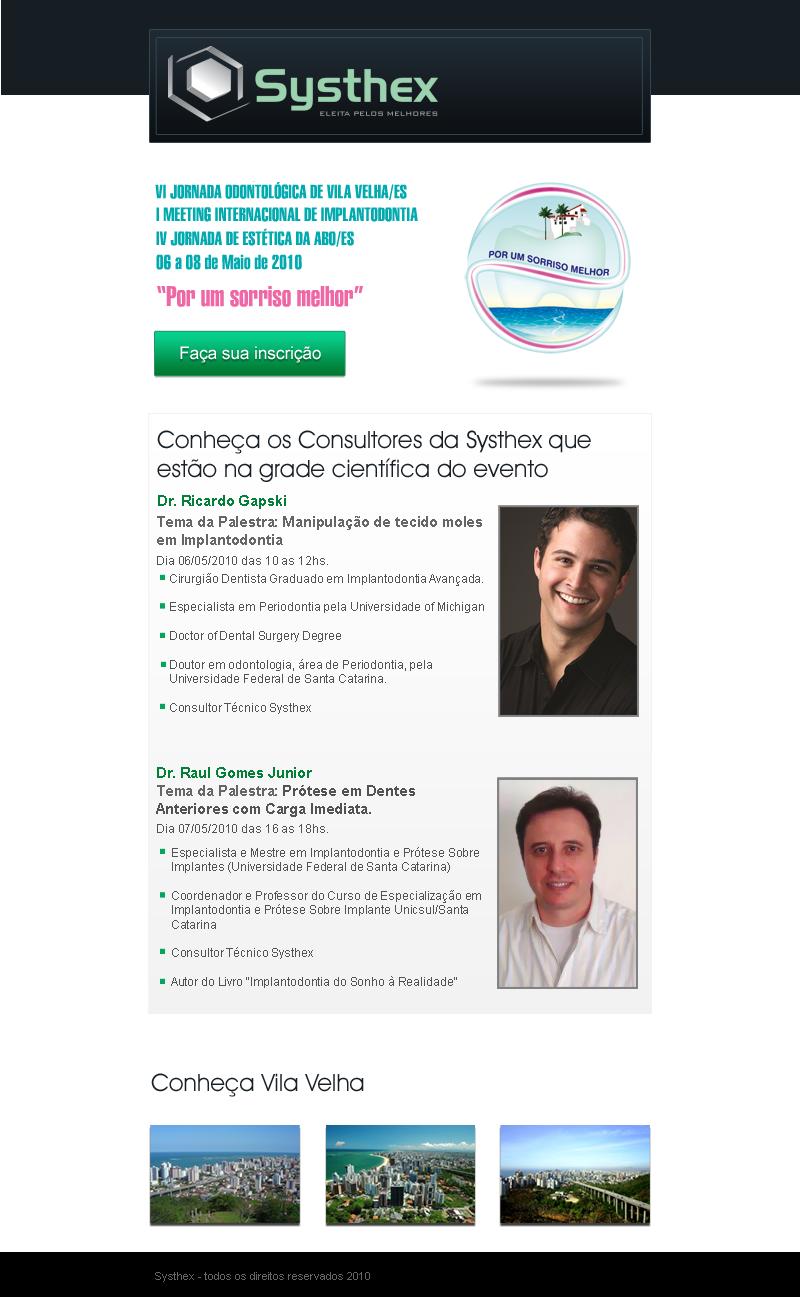
<style>
.page{position:relative;width:800px;height:1297px;background:#ffffff}
.page>*{position:absolute;margin:0}
.t1{font:8px "BankGothicBT-Medium";letter-spacing:-0.01em;color:#919496;text-transform:uppercase}
.t2{font:17.4px "ArialMT";letter-spacing:-0.01em;color:#ffffff}
.t3{font:24px "AvantGardeITCbyBT-Book";color:#182027}
.t4{font:15px "Arial-BoldMT";letter-spacing:-0.01em;color:#028038}
.t5{font:15px "Arial-BoldMT";letter-spacing:-0.01em;color:#666666}
.t6{font:12px "ArialMT";letter-spacing:-0.01em;color:#525252}
.t7{font:15px "Arial-BoldMT";letter-spacing:-0.01em;color:#525252}
.t8{font:11px "ArialMT";color:#666666}
</style>
<div class="page">
<p class="t1" style="left:320px;top:111px;width:118px;height:5px">Eleita Pelos Melhores</p>
<p class="t2" style="left:180px;top:346px;width:141px;height:17px">Faça sua inscrição</p>
<p class="t3" style="left:157px;top:430px;width:434px;height:52px">Conheça os Consultores da Systhex que estão na grade científica do evento</p>
<p class="t4" style="left:158px;top:495px;width:128px;height:14px">Dr. Ricardo Gapski</p>
<p class="t5" style="left:157px;top:516px;width:325px;height:32px">Tema da Palestra: Manipulação de tecido moles em Implantodontia<br><br>Data:06/05/2010 das 10:00 as 12:00 hs.</p>
<p class="t6" style="left:157px;top:556px;width:171px;height:9px">Dia 06/05/2010 das 10 as 12hs.</p>
<p class="t6" style="left:170px;top:573px;width:314px;height:141px">Cirurgião Dentista Graduado em Implantodontia Avançada.<br><br>Especialista em Periodontia pela Universidade of Michigan<br><br>Doctor of Dental Surgery Degree<br><br>Doutor em odontologia, área de Periodontia, pela Universidade Federal de Santa Catarina.<br><br>Consultor Técnico Systhex</p>
<p class="t4" style="left:157px;top:767px;width:155px;height:11px">Dr. Raul Gomes Junior</p>
<p class="t7" style="left:156px;top:785px;width:259px;height:32px"><span class="t5">Tema da Palestra: </span>Prótese em Dentes Anteriores com Carga Imediata.</p>
<p class="t6" style="left:157px;top:824px;width:171px;height:9px">Dia 07/05/2010 das 16 as 18hs.</p>
<p class="t6" style="left:171px;top:847px;width:310px;height:141px">Especialista e Mestre em Implantodontia e Prótese Sobre Implantes (Universidade Federal de Santa Catarina)<br><br>Coordenador e Professor do Curso de Especialização em Implantodontia e Prótese Sobre Implante Unicsul/Santa Catarina<br><br>Consultor Técnico Systhex<br><br>Autor do Livro "Implantodontia do Sonho à Realidade"</p>
<p class="t3" style="left:151px;top:1073px;width:213px;height:24px">Conheça Vila Velha</p>
<p class="t8" style="left:155px;top:1272px;width:215px;height:10px">Systhex - todos os direitos reservados 2010</p>
</div>
